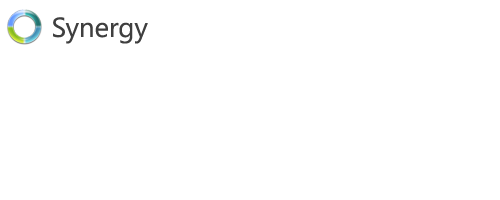
<style>
.page{position:relative;width:500px;height:200px;background:#ffffff}
.page>*{position:absolute;margin:0}
.t1{font:27.6px "SegoeUI";color:#3f3f3f}
</style>
<div class="page">
<p class="t1" style="left:53px;top:17px;width:95px;height:27px">Synergy</p>
</div>
